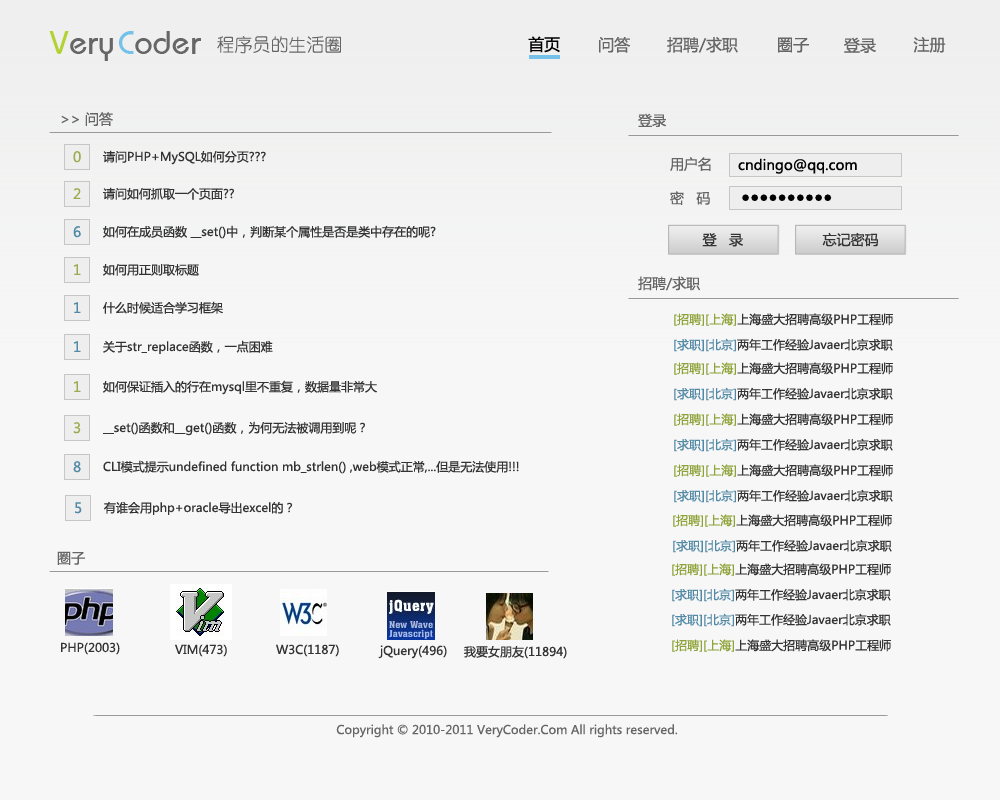
<style>
.page{position:relative;width:1000px;height:800px;background:#f7f7f7}
.page>*{position:absolute;margin:0}
.t1{font:30px "BauhausMedium";color:#666666}
.t2{font:30px "BauhausMedium";color:#b2d133}
.t3{font:30px "BauhausMedium";color:#74c2e9}
.t4{font:18px "YouYuan";color:#666666}
.t5{font:16px "MicrosoftYaHei";color:#000000}
.t6{font:16px "MicrosoftYaHei";color:#666666}
.t7{font:14px "MicrosoftYaHei";color:#666666}
.t8{font:12px "MicrosoftYaHei";color:#333333}
.t9{font:14px "MicrosoftYaHei";color:#9aac4f}
.t10{font:14px "MicrosoftYaHei";color:#010101}
.t11{font:14px "MicrosoftYaHei";color:#5289a5}
.t12{font:14px "MicrosoftYaHei";color:#333333}
.t13{font:12px "MicrosoftYaHei";color:#8da238}
.t14{font:12px "MicrosoftYaHei";color:#5289a5}
.t15{font:12px "MicrosoftYaHei";color:#666666}
</style>
<div class="page">
<p class="t1" style="left:49px;top:31px;width:64px;height:30px"><span class="t2">V</span>ery</p>
<p class="t1" style="left:118px;top:31px;width:83px;height:23px"><span class="t3">C</span>oder</p>
<p class="t4" style="left:217px;top:36px;width:124px;height:18px">程序员的生活圈</p>
<p class="t5" style="left:528px;top:36px;width:32px;height:17px">首页</p>
<p class="t6" style="left:599px;top:37px;width:32px;height:16px">问答</p>
<p class="t6" style="left:667px;top:37px;width:71px;height:16px">招聘/求职</p>
<p class="t6" style="left:778px;top:37px;width:31px;height:16px">圈子</p>
<p class="t6" style="left:844px;top:37px;width:32px;height:16px">登录</p>
<p class="t6" style="left:913px;top:37px;width:33px;height:16px">注册</p>
<p class="t7" style="left:61px;top:112px;width:52px;height:14px">&gt;&gt; 问答</p>
<p class="t7" style="left:638px;top:113px;width:29px;height:14px">登录</p>
<p class="t8" style="left:103px;top:150px;width:163px;height:15px">请问PHP+MySQL如何分页???</p>
<p class="t9" style="left:73px;top:151px;width:8px;height:12px">0</p>
<p class="t7" style="left:670px;top:157px;width:41px;height:14px">用户名</p>
<p class="t10" style="left:738px;top:158px;width:119px;height:16px">cndingo@qq.com</p>
<p class="t9" style="left:73px;top:188px;width:8px;height:11px">2</p>
<p class="t8" style="left:103px;top:187px;width:131px;height:13px">请问如何抓取一个页面??</p>
<p class="t7" style="left:670px;top:191px;width:40px;height:14px">密   码</p>
<p class="t10" style="left:742px;top:194px;width:90px;height:7px">●●●●●●●●●●</p>
<p class="t11" style="left:73px;top:226px;width:8px;height:12px">6</p>
<p class="t8" style="left:103px;top:225px;width:333px;height:14px">如何在成员函数 __set()中，判断某个属性是否是类中存在的呢?</p>
<p class="t12" style="left:702px;top:233px;width:41px;height:14px">登   录</p>
<p class="t12" style="left:822px;top:232px;width:56px;height:15px">忘记密码</p>
<p class="t9" style="left:74px;top:264px;width:7px;height:11px">1</p>
<p class="t8" style="left:103px;top:264px;width:96px;height:12px">如何用正则取标题</p>
<p class="t7" style="left:638px;top:276px;width:62px;height:15px">招聘/求职</p>
<p class="t11" style="left:74px;top:302px;width:7px;height:11px">1</p>
<p class="t8" style="left:103px;top:301px;width:120px;height:13px">什么时候适合学习框架</p>
<p class="t8" style="left:674px;top:313px;width:219px;height:13px"><span class="t13">[招聘][上海]</span>上海盛大招聘高级PHP工程师</p>
<p class="t11" style="left:74px;top:341px;width:7px;height:11px">1</p>
<p class="t8" style="left:103px;top:340px;width:170px;height:14px">关于str_replace函数，一点困难</p>
<p class="t8" style="left:674px;top:338px;width:219px;height:14px"><span class="t14">[求职][北京]</span>两年工作经验Javaer北京求职</p>
<p class="t8" style="left:674px;top:362px;width:219px;height:13px"><span class="t13">[招聘][上海]</span>上海盛大招聘高级PHP工程师</p>
<p class="t9" style="left:74px;top:381px;width:7px;height:11px">1</p>
<p class="t8" style="left:103px;top:380px;width:274px;height:15px">如何保证插入的行在mysql里不重复，数据量非常大</p>
<p class="t8" style="left:674px;top:387px;width:219px;height:14px"><span class="t14">[求职][北京]</span>两年工作经验Javaer北京求职</p>
<p class="t8" style="left:674px;top:413px;width:219px;height:13px"><span class="t13">[招聘][上海]</span>上海盛大招聘高级PHP工程师</p>
<p class="t9" style="left:73px;top:422px;width:8px;height:12px">3</p>
<p class="t8" style="left:103px;top:421px;width:262px;height:15px">__set()函数和__get()函数，为何无法被调用到呢？</p>
<p class="t8" style="left:674px;top:438px;width:219px;height:14px"><span class="t14">[求职][北京]</span>两年工作经验Javaer北京求职</p>
<p class="t11" style="left:73px;top:461px;width:8px;height:12px">8</p>
<p class="t8" style="left:103px;top:460px;width:416px;height:14px">CLI模式提示undefined function mb_strlen() ,web模式正常,...但是无法使用!!!</p>
<p class="t8" style="left:674px;top:464px;width:219px;height:13px"><span class="t13">[招聘][上海]</span>上海盛大招聘高级PHP工程师</p>
<p class="t8" style="left:674px;top:489px;width:219px;height:14px"><span class="t14">[求职][北京]</span>两年工作经验Javaer北京求职</p>
<p class="t11" style="left:75px;top:502px;width:7px;height:12px">5</p>
<p class="t8" style="left:104px;top:501px;width:189px;height:14px">有谁会用php+oracle导出excel的？</p>
<p class="t8" style="left:673px;top:514px;width:219px;height:13px"><span class="t13">[招聘][上海]</span>上海盛大招聘高级PHP工程师</p>
<p class="t8" style="left:673px;top:539px;width:219px;height:14px"><span class="t14">[求职][北京]</span>两年工作经验Javaer北京求职</p>
<p class="t7" style="left:57px;top:551px;width:28px;height:14px">圈子</p>
<p class="t8" style="left:672px;top:563px;width:219px;height:13px"><span class="t13">[招聘][上海]</span>上海盛大招聘高级PHP工程师</p>
<p class="t8" style="left:672px;top:588px;width:219px;height:14px"><span class="t14">[求职][北京]</span>两年工作经验Javaer北京求职</p>
<p class="t8" style="left:672px;top:613px;width:219px;height:14px"><span class="t14">[求职][北京]</span>两年工作经验Javaer北京求职</p>
<p class="t8" style="left:672px;top:639px;width:219px;height:13px"><span class="t13">[招聘][上海]</span>上海盛大招聘高级PHP工程师</p>
<p class="t8" style="left:61px;top:642px;width:59px;height:13px">PHP(2003)</p>
<p class="t8" style="left:175px;top:644px;width:52px;height:13px">VIM(473)</p>
<p class="t8" style="left:276px;top:644px;width:63px;height:13px">W3C(1187)</p>
<p class="t8" style="left:378px;top:645px;width:69px;height:14px">jQuery(496)</p>
<p class="t8" style="left:464px;top:645px;width:103px;height:14px">我要女朋友(11894)</p>
<p class="t15" style="left:336px;top:724px;width:342px;height:14px">Copyright © 2010-2011 VeryCoder.Com All rights reserved.</p>
</div>
